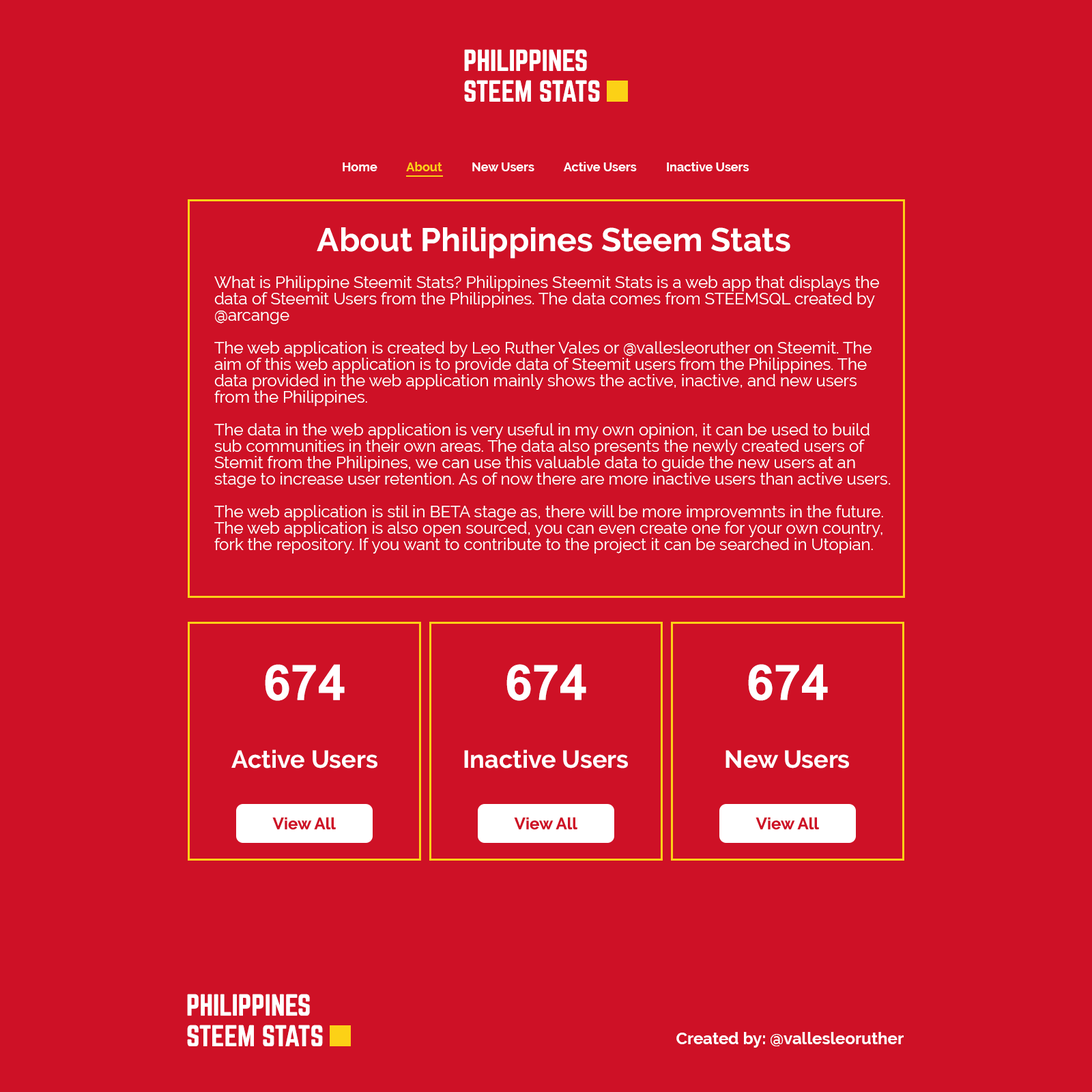
<style>
.page{position:relative;width:1092px;height:1092px;background:#ce1126}
.page>*{position:absolute;margin:0}
.t1{font:12.3px "Raleway-Bold";color:#ffffff}
.t2{font:12.3px "Raleway-Bold";color:#fcd116}
.t3{font:32.8px "Raleway-Bold";color:#ffffff}
.t4{font:16.4px/16.4px "Raleway-Regular";color:#ffffff}
.t5{font:49.1px "Arial-BoldMT";color:#ffffff}
.t6{font:24.6px "Raleway-Bold";color:#ffffff}
.t7{font:16.4px "Raleway-Bold";color:#ce1126}
.t8{font:16.5px "Raleway-Bold";color:#ffffff}
</style>
<div class="page">
<p class="t1" style="left:343px;top:162px;width:406px;height:9px">Home          <span class="t2">About</span>          New Users          Active Users          Inactive Users</p>
<p class="t3" style="left:317px;top:227px;width:473px;height:32px">About Philippines Steem Stats</p>
<p class="t4" style="left:214px;top:276px;width:677px;height:278px">What is Philippine Steemit Stats? Philippines Steemit Stats is a web app that displays the <br>data of Steemit Users from the Philippines. The data comes from STEEMSQL created by <br>@arcange<br><br>The web application is created by Leo Ruther Vales or @vallesleoruther on Steemit. The <br>aim of this web application is to provide data of Steemit users from the Philippines. The <br>data provided in the web application mainly shows the active, inactive, and new users <br>from the Philippines.<br><br>The data in the web application is very useful in my own opinion, it can be used to build<br>sub communities in their own areas. The data also presents the newly created users of <br>Stemit from the Philipines, we can use this valuable data to guide the new users at an <br>stage to increase user retention. As of now there are more inactive users than active users.<br><br>The web application is stil in BETA stage as, there will be more improvemnts in the future.<br>The web application is also open sourced, you can even create one for your own country,<br>fork the repository. If you want to contribute to the project it can be searched in Utopian.</p>
<p class="t5" style="left:265px;top:664px;width:80px;height:37px">674</p>
<p class="t5" style="left:506px;top:664px;width:80px;height:37px">674</p>
<p class="t5" style="left:748px;top:664px;width:80px;height:37px">674</p>
<p class="t6" style="left:231px;top:749px;width:146px;height:19px">Active Users</p>
<p class="t6" style="left:464px;top:749px;width:164px;height:19px">Inactive Users</p>
<p class="t6" style="left:725px;top:750px;width:124px;height:18px">New Users</p>
<p class="t7" style="left:272px;top:817px;width:64px;height:13px">View All</p>
<p class="t7" style="left:514px;top:817px;width:63px;height:13px">View All</p>
<p class="t7" style="left:756px;top:817px;width:63px;height:13px">View All</p>
<p class="t8" style="left:676px;top:1032px;width:228px;height:16px">Created by: @vallesleoruther</p>
</div>
